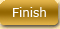
<style>
.page{position:relative;width:60px;height:29px}
.page>*{position:absolute;margin:0}
.t1{font:12px "Verdana";color:#ffffff}
</style>
<div class="page">
<p class="t1" style="left:13px;top:7px;width:33px;height:10px">Finish</p>
</div>
